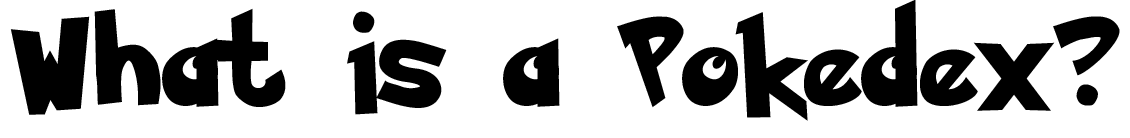
<style>
.page{position:relative;width:1130px;height:138px;background:#ffffff}
.page>*{position:absolute;margin:0}
.t1{font:100px "PokemonSolidNormal";letter-spacing:0.08em;color:#000000}
</style>
<div class="page">
<p class="t1" style="left:10px;top:0px;width:1110px;height:121px">What is a Pokedex?</p>
</div>
